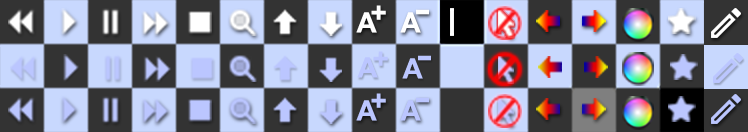
<style>
.page{position:relative;width:748px;height:132px;background:#333333}
.page>*{position:absolute;margin:0}
.t1{font:28px "Arial-BoldMT";color:#ffffff}
.t2{font:48px "ArialMT";color:#ffffff}
.t3{font:28px "Arial-BoldMT";color:#bbc6ff}
.t4{font:48px "ArialMT";color:#bbc6ff}
</style>
<div class="page">
<p class="t1" style="left:371px;top:5px;width:15px;height:15px">+</p>
<p class="t1" style="left:356px;top:12px;width:21px;height:21px">A</p>
<p class="t1" style="left:400px;top:12px;width:21px;height:21px">A</p>
<p class="t2" style="left:416px;top:9px;width:13px;height:6px">-</p>
<p class="t3" style="left:373px;top:51px;width:15px;height:15px">+</p>
<p class="t3" style="left:357px;top:57px;width:21px;height:21px">A</p>
<p class="t3" style="left:402px;top:58px;width:21px;height:21px">A</p>
<p class="t4" style="left:418px;top:55px;width:13px;height:6px">-</p>
<p class="t3" style="left:356px;top:100px;width:21px;height:21px">A</p>
<p class="t3" style="left:371px;top:93px;width:15px;height:15px">+</p>
<p class="t3" style="left:400px;top:100px;width:21px;height:21px">A</p>
<p class="t4" style="left:416px;top:97px;width:13px;height:6px">-</p>
</div>
